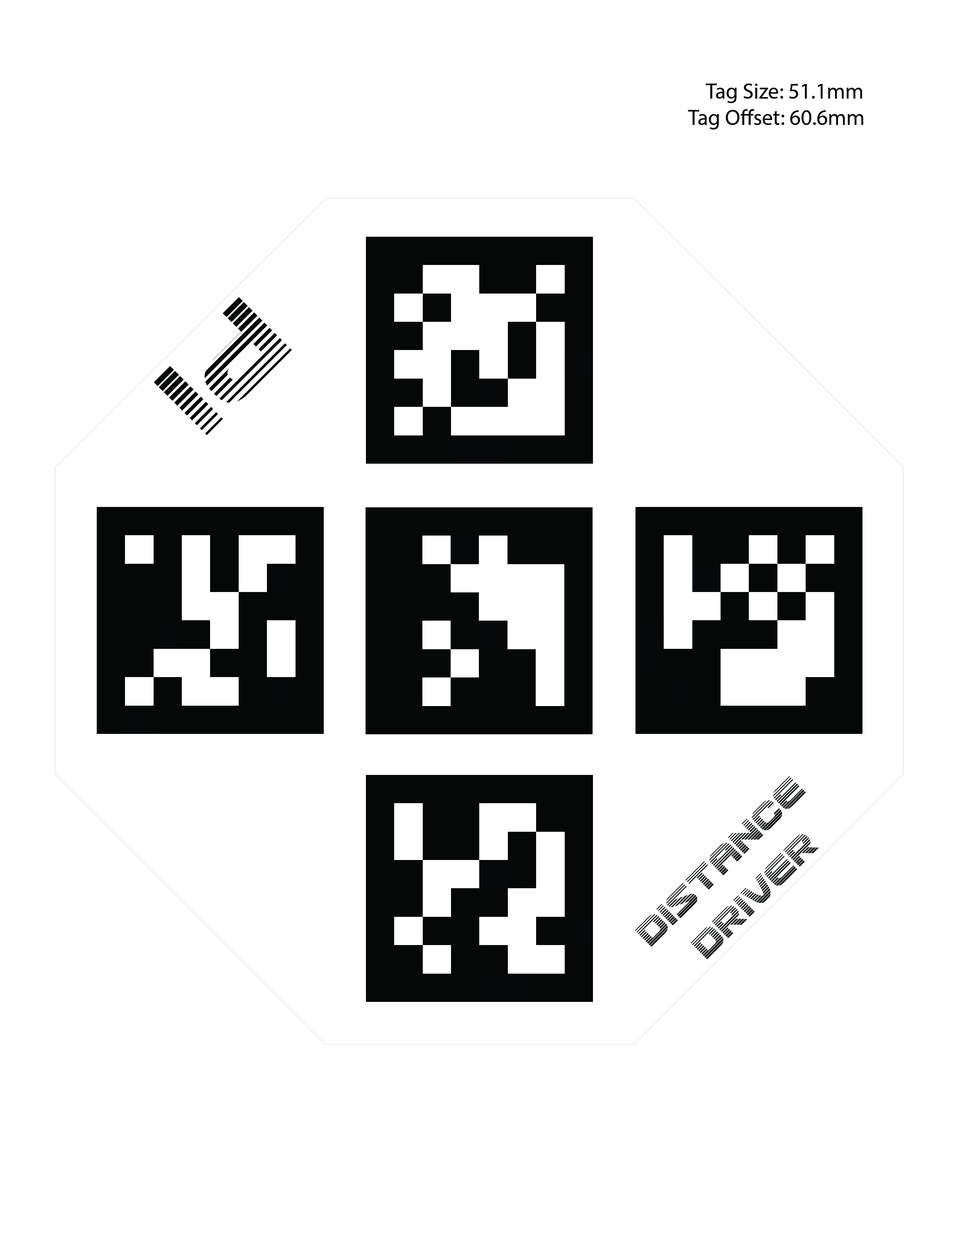
<style>
.page{position:relative;width:960px;height:1242px;background:#ffffff}
.page>*{position:absolute;margin:0}
.t1{font:22px "MyriadPro-Regular";color:#060808}
.t2{font:129.3px "UsuziGradient";color:#060808}
.t3{font:40px "UsuziGradient";color:#060808}
</style>
<div class="page">
<p class="t1" style="left:688px;top:84px;width:175px;height:45px">Tag Size: 51.1mm<br>Tag Offset: 60.6mm</p>
<p class="t2" style="left:154px;top:297px;width:138px;height:138px;rotate:135deg">Pi</p>
<p class="t3" style="left:635px;top:776px;width:184px;height:184px;text-align:center;rotate:-45deg">DISTANCE<br>DRIVER</p>
</div>
